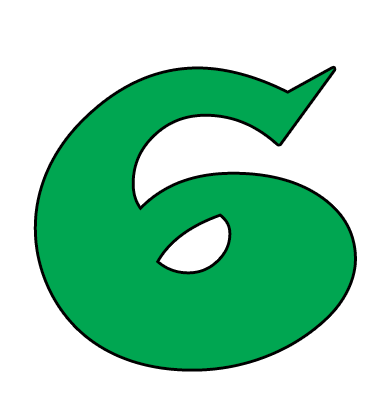
<style>
.page{position:relative;width:387px;height:407px;background:#ffffff}
.page>*{position:absolute;margin:0}
.t1{font:400px "SnapITC-Regular";color:#00a651}
</style>
<div class="page">
<p class="t1" style="left:36px;top:68px;width:318px;height:301px">6</p>
</div>
